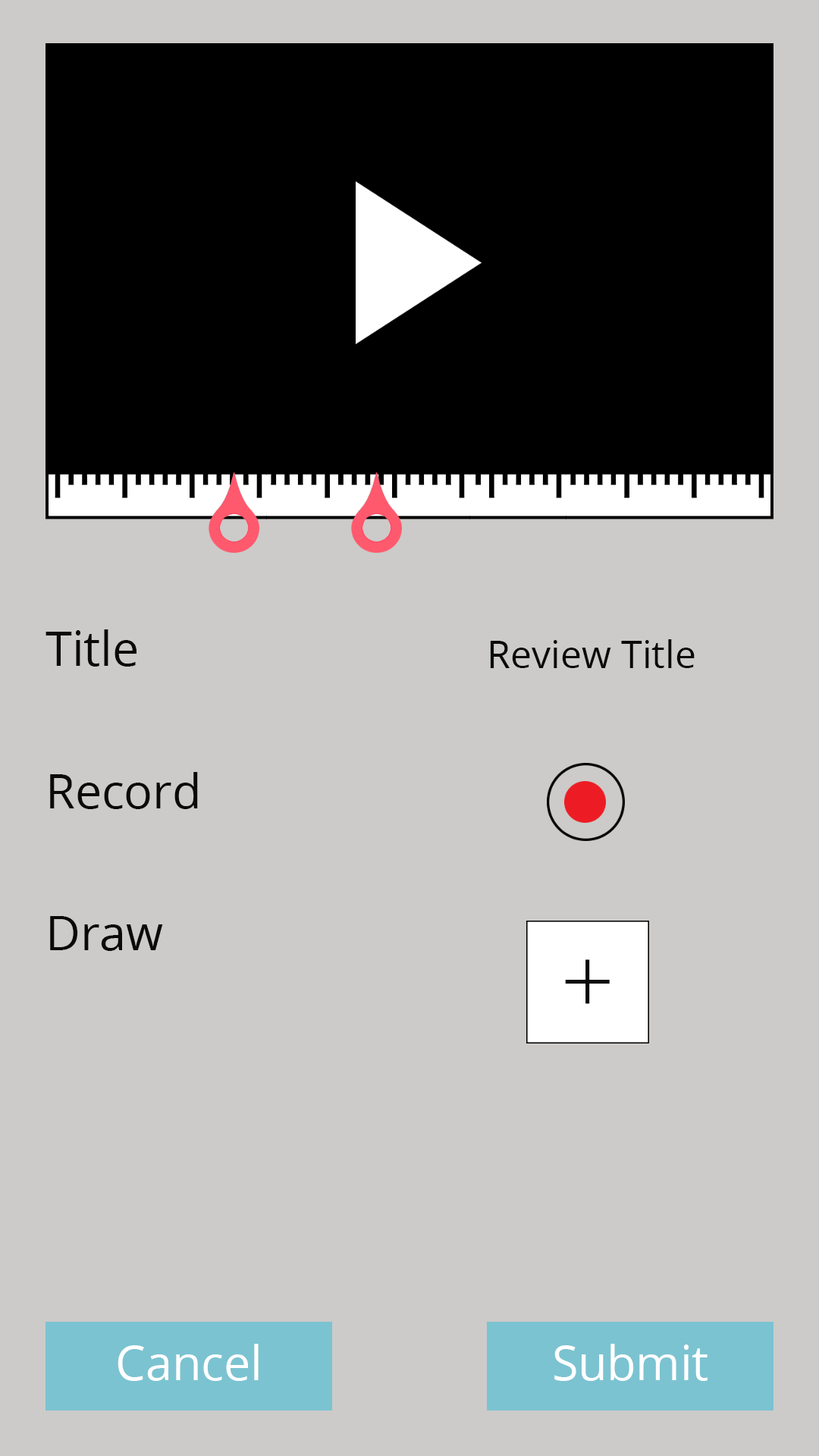
<style>
.page{position:relative;width:819px;height:1456px;background:#cccbc9}
.page>*{position:absolute;margin:0}
.t1{font:47.4px/142.2px "OpenSans";color:#0a0a0a}
.t2{font:37.9px "OpenSans";color:#0a0a0a}
.t3{font:47.4px "OpenSans";color:#ffffff}
</style>
<div class="page">
<p class="t1" style="left:45px;top:629px;width:153px;height:322px">Title<br>Record<br>Draw</p>
<p class="t2" style="left:490px;top:639px;width:205px;height:29px">Review Title</p>
<p class="t3" style="left:118px;top:1344px;width:141px;height:37px">Cancel</p>
<p class="t3" style="left:554px;top:1344px;width:154px;height:37px">Submit</p>
</div>
